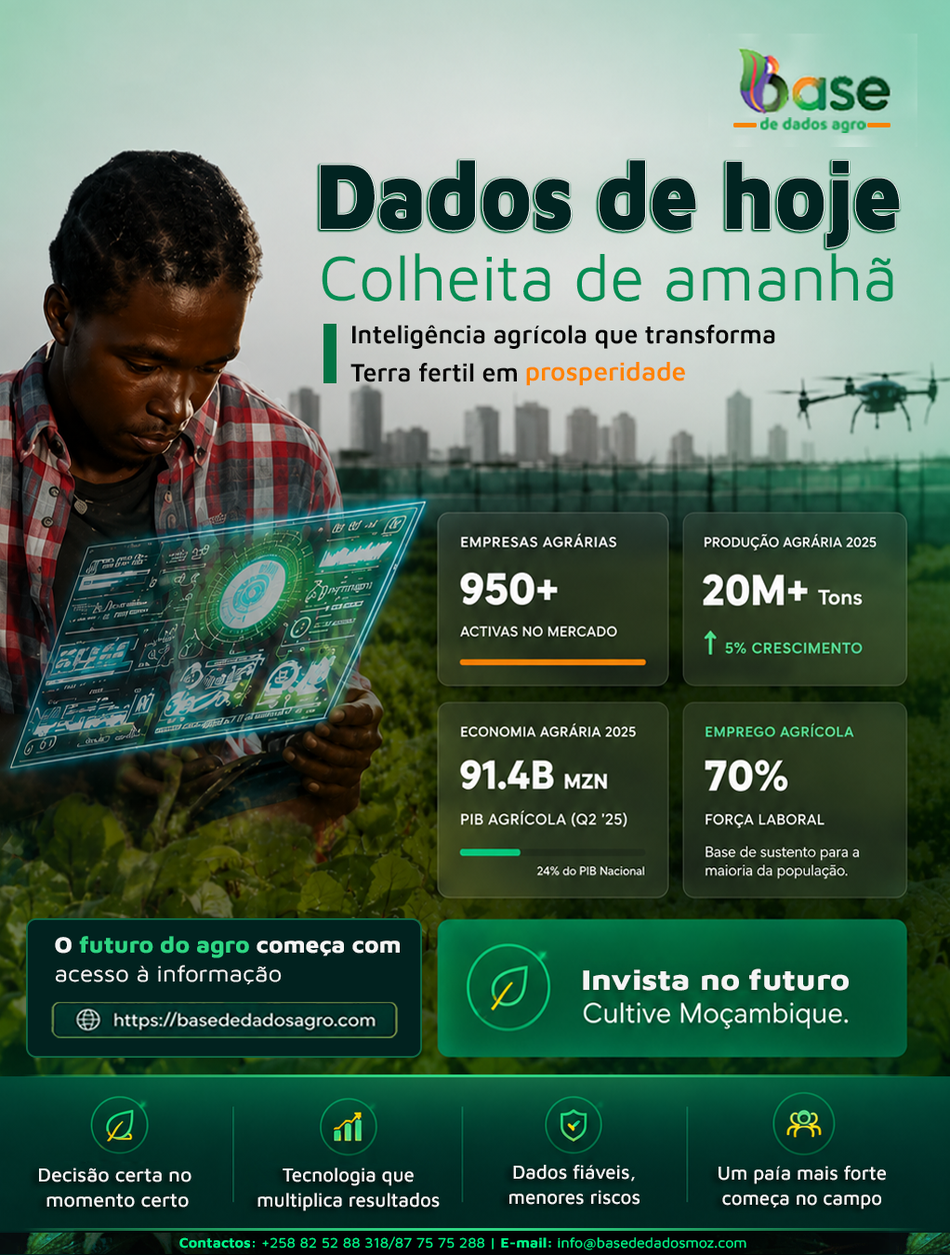
<style>
.page{position:relative;width:950px;height:1255px}
.page>*{position:absolute;margin:0}
.t1{font:95.8px "MavenPro-Black";color:#012421;scale:0.89 1}
.t2{font:65.5px "MavenPro-Regular";color:#038e54}
.t3{font:26px/38.6px "MavenPro-SemiBold";color:#060606;scale:0.95 1}
.t4{font:26px "MavenPro-SemiBold";color:#ff8300}
.t5{font:22.8px/28.4px "MavenPro-Regular";color:#f4f4f4;scale:1.07 1}
.t6{font:22.8px/28.4px "MavenPro-ExtraBold";color:#f4f4f4;scale:1.07 1}
.t7{font:22.8px/28.4px "MavenPro-ExtraBold";color:#2ed582;scale:1.07 1}
.t8{font:22.8px/28.4px "MavenPro-ExtraBold";color:#2ed783;scale:1.07 1}
.t9{font:28.8px "MavenPro-ExtraBold";color:#f4f4f4;scale:1.15 1}
.t10{font:19.5px/25.6px "MavenPro-Medium";color:#f4f4f4}
.t11{font:14px "MavenPro-Regular";color:#00f98b;scale:1.07 1}
.t12{font:14px "MavenPro-Bold";color:#00f98b;scale:1.07 1}
</style>
<div class="page">
<p class="t1" style="left:320px;top:160px;width:580px;height:87px">Dados de hoje</p>
<p class="t2" style="left:322px;top:253px;width:572px;height:48px">Colheita de amanhã</p>
<p class="t3" style="left:351px;top:325px;width:425px;height:57px">Inteligência agrícola que transforma<br>Terra fertil em</p>
<p class="t4" style="left:526px;top:362px;width:159px;height:24px">prosperidade</p>
<p class="t5" style="left:55px;top:936px;width:345px;height:49px"><span class="t6">O </span><span class="t7">futuro do </span><span class="t8">agro </span><span class="t6">começa com <br></span>acesso à informação</p>
<p class="t9" style="left:583px;top:968px;width:266px;height:22px">Invista no futuro</p>
<p class="t10" style="left:39px;top:1167px;width:153px;height:40px;text-align:center">Decisão certa no <br>momento certo</p>
<p class="t10" style="left:258px;top:1167px;width:182px;height:44px;text-align:center">Tecnologia que<br>multiplica resultados</p>
<p class="t10" style="left:510px;top:1164px;width:130px;height:40px;text-align:center">Dados fiáveis,<br>menores riscos</p>
<p class="t10" style="left:719px;top:1165px;width:167px;height:44px;text-align:center">Um paía mais forte<br>começa no campo</p>
<p class="t11" style="left:179px;top:1236px;width:568px;height:14px"><span class="t12">Contactos:</span> +258 82 52 88 318/87 75 75 288 | <span class="t12">E-mail:</span> info@basededadosmoz.com</p>
</div>
